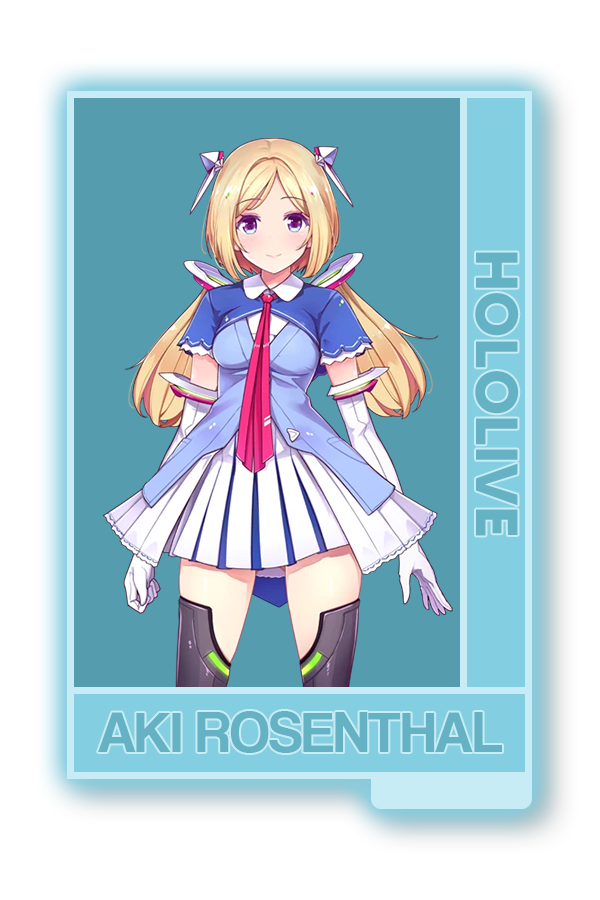
<style>
.page{position:relative;width:600px;height:900px;background:#ffffff}
.page>*{position:absolute;margin:0}
.t1{font:59.2px "MADETOMMY-Bold";color:#66b2c5}
.t2{font:58.7px "CoolveticaRg-Regular";color:#66b2c5}
</style>
<div class="page">
<p class="t1" style="left:475px;top:252px;width:44px;height:284px;rotate:90deg">HOLOLIVE</p>
<p class="t2" style="left:98px;top:711px;width:404px;height:42px">AKI ROSENTHAL</p>
</div>
